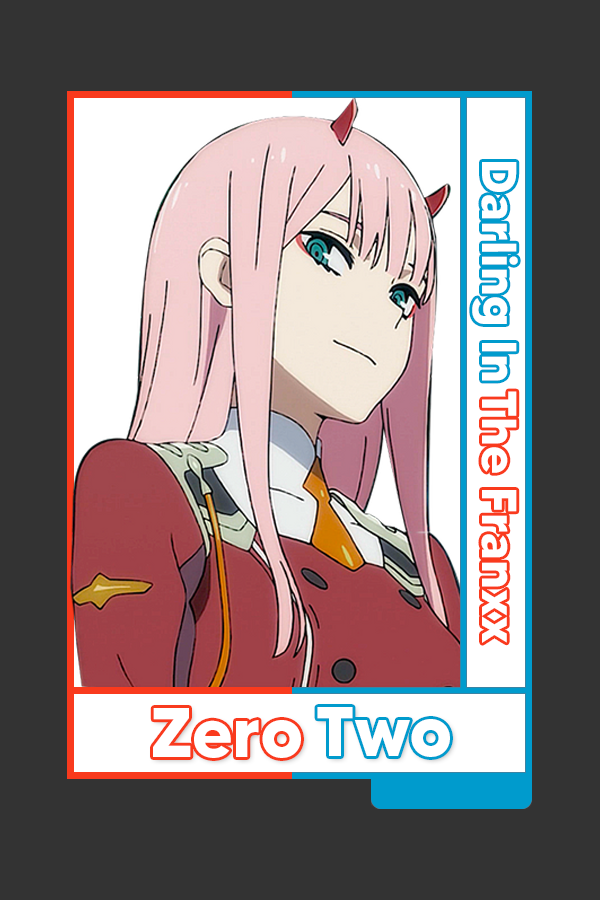
<style>
.page{position:relative;width:600px;height:900px;background:#333333}
.page>*{position:absolute;margin:0}
.t1{font:48.8px "MADETOMMY-Bold";color:#ffffff}
.t2{font:70.1px "MADETOMMY-Bold";color:#ffffff}
</style>
<div class="page">
<p class="t1" style="left:472px;top:162px;width:46px;height:219px;rotate:90deg">Darling In</p>
<p class="t1" style="left:481px;top:391px;width:36px;height:252px;rotate:90deg">The Franxx</p>
<p class="t2" style="left:153px;top:708px;width:148px;height:50px">Zero</p>
<p class="t2" style="left:317px;top:707px;width:133px;height:50px">Two</p>
</div>
